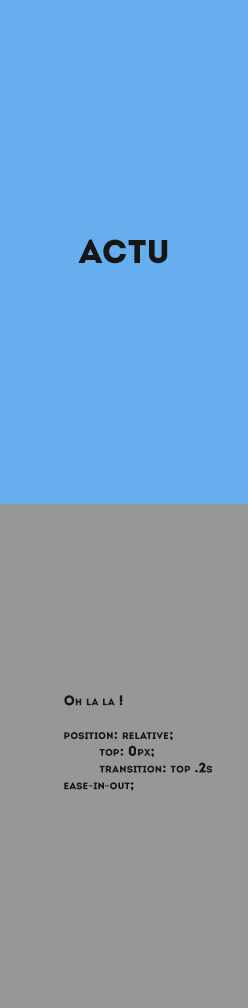
<style>
.page{position:relative;width:248px;height:1008px;background:#979797}
.page>*{position:absolute;margin:0}
.t1{font:14px "Intro";color:#161616;font-variant:small-caps}
.t2{font:14px "TimesNewRomanPSMT";color:#161616;font-variant:small-caps}
</style>
<div class="page">
<p class="t1" style="left:64px;top:695px;width:149px;height:96px">Oh la la !<br><br>position: relative;<br> top: 0px;<br> transition: top .2s ease<span class="t2">-</span>in<span class="t2">-</span>out;</p>
</div>
